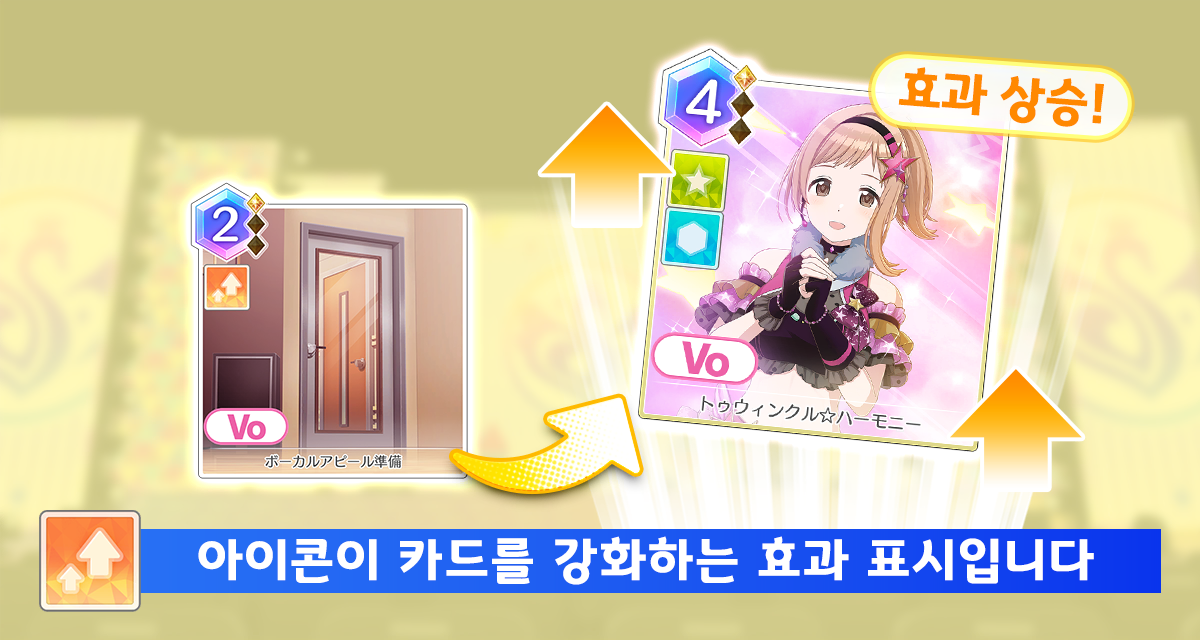
<style>
.page{position:relative;width:1200px;height:640px}
.page>*{position:absolute;margin:0}
.t1{font:50.7px "GyeonggiTitleB";color:#ff8800}
.t2{font:50.7px "GyeonggiTitleB";letter-spacing:0.05em;color:#ffffff}
</style>
<div class="page">
<p class="t1" style="left:898px;top:67px;width:206px;height:60px;rotate:5deg">효과 상승!</p>
<p class="t2" style="left:198px;top:536px;width:896px;height:49px">아이콘이 카드를 강화하는 효과 표시입니다</p>
</div>
